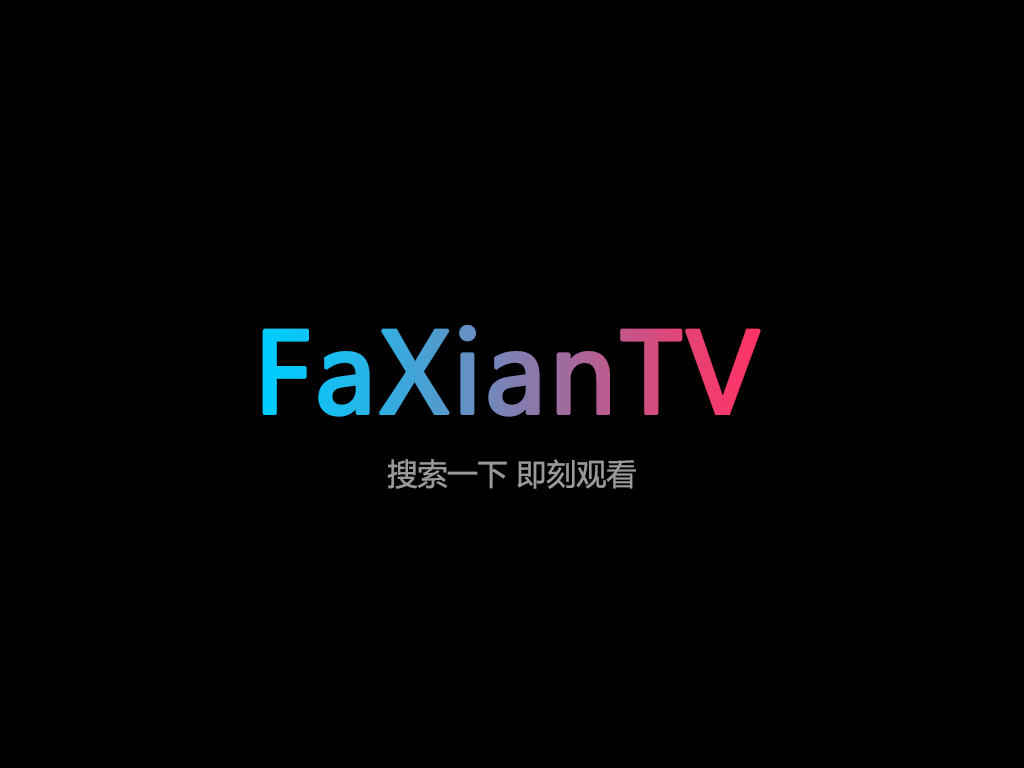
<style>
.page{position:relative;width:1024px;height:768px;background:#000000}
.page>*{position:absolute;margin:0}
.t1{font:110px "MicrosoftYaHei";font-weight:bold}
.t2{font:30px "MicrosoftYaHei";color:#999999}
</style>
<div class="page">
<p class="t1" style="left:262px;top:325px;width:499px;height:92px">FaXianTV</p>
<p class="t2" style="left:387px;top:459px;width:249px;height:30px">搜索一下 即刻观看</p>
</div>
